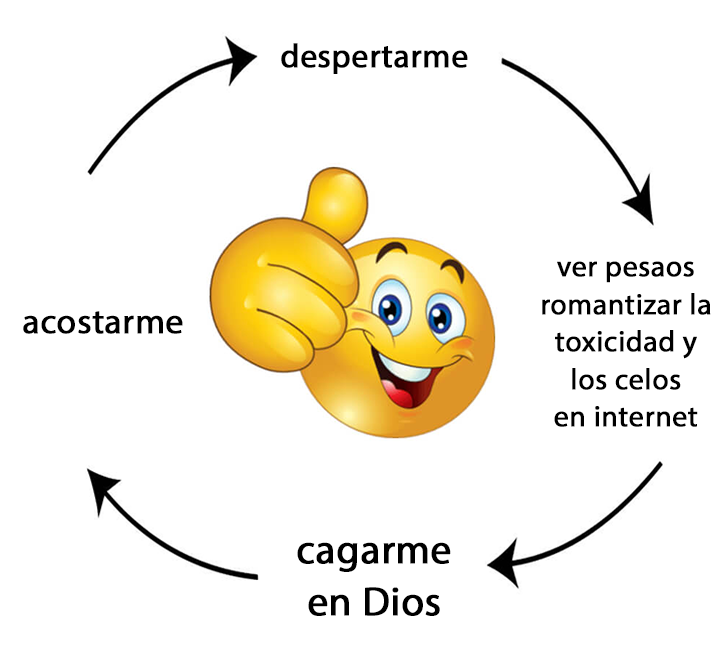
<style>
.page{position:relative;width:725px;height:645px;background:#ffffff}
.page>*{position:absolute;margin:0}
.t1{font:33.3px "MyriadPro-Regular";color:#000000;font-weight:bold}
.t2{font:29.6px "MyriadPro-Regular";color:#000000;font-weight:bold}
.t3{font:35.2px "MyriadPro-Regular";color:#000000;font-weight:bold}
.t4{font:40.8px "MyriadPro-Regular";color:#000000;font-weight:bold}
</style>
<div class="page">
<p class="t1" style="left:281px;top:43px;width:187px;height:31px">despertarme</p>
<p class="t2" style="left:542px;top:261px;width:169px;height:166px;text-align:center">ver pesaos<br>romantizar la<br>toxicidad y<br>los celos<br>en internet</p>
<p class="t3" style="left:23px;top:311px;width:160px;height:23px">acostarme</p>
<p class="t4" style="left:297px;top:542px;width:154px;height:74px;text-align:center">cagarme<br>en Dios</p>
</div>
